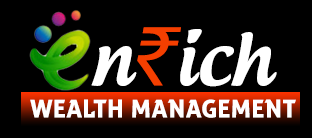
<style>
.page{position:relative;width:312px;height:138px;background:#000000}
.page>*{position:absolute;margin:0}
.t1{font:72px "AndrogyneMedium";color:#ffffff}
.t2{font:88px "MyriadPro-It";color:#f43f00}
.t3{font:25px "zwodrei-Bold";color:#ffffff}
</style>
<div class="page">
<p class="t1" style="left:91px;top:27px;width:186px;height:60px">n<span class="t2">₹</span>ich</p>
<p class="t3" style="left:30px;top:99px;width:266px;height:19px">WEALTH MANAGEMENT</p>
</div>
